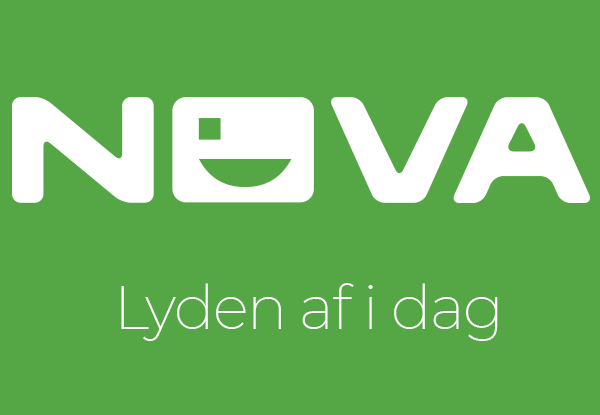
<style>
.page{position:relative;width:600px;height:415px;background:#55a745}
.page>*{position:absolute;margin:0}
.t1{font:60px "Montserrat-ExtraLight";letter-spacing:-0.025em;color:#ffffff}
</style>
<div class="page">
<p class="t1" style="left:121px;top:283px;width:377px;height:58px">Lyden af i dag</p>
</div>
